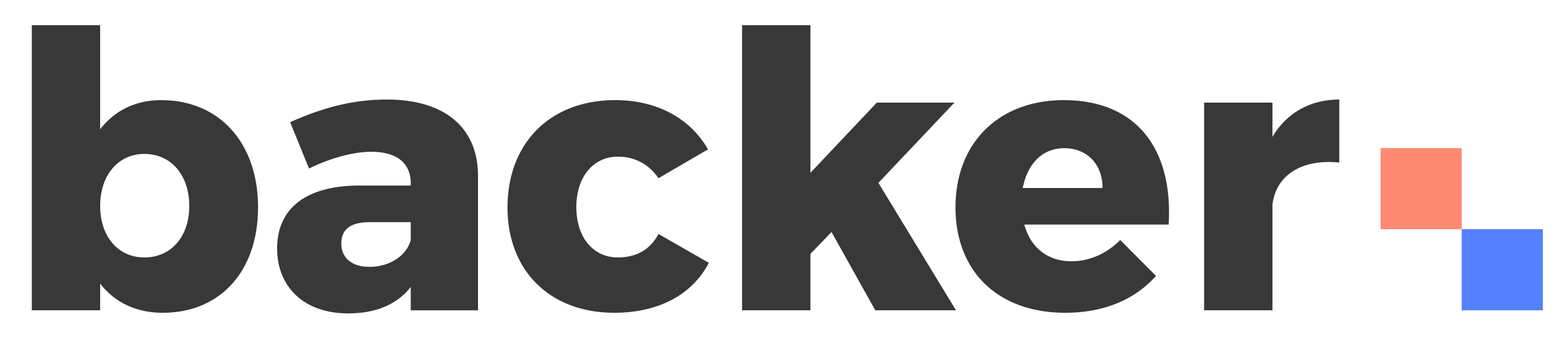
<style>
.page{position:relative;width:1568px;height:349px;background:#ffffff}
.page>*{position:absolute;margin:0}
.t1{font:384px "Montserrat-Bold";color:#383838}
</style>
<div class="page">
<p class="t1" style="left:31px;top:25px;width:1308px;height:289px">backer</p>
</div>
